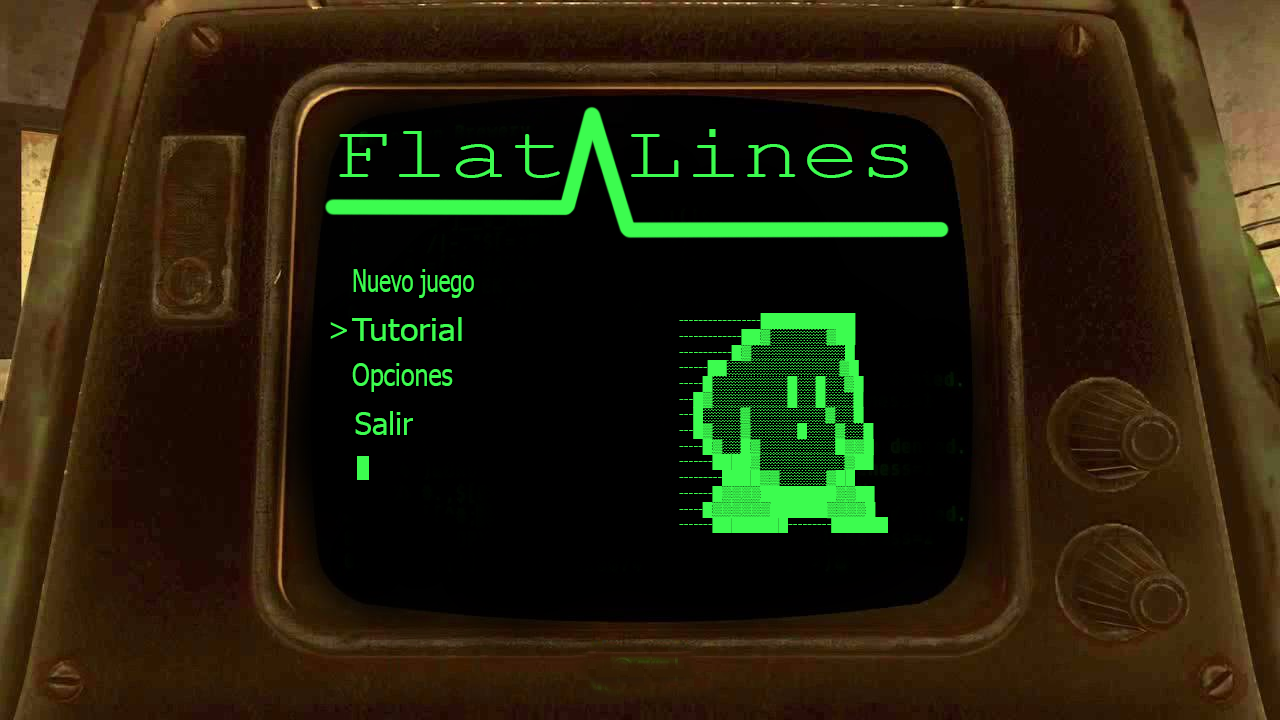
<style>
.page{position:relative;width:1280px;height:720px;background:#000000}
.page>*{position:absolute;margin:0}
.t1{font:74.3px "CourierNewPSMT";color:#3cfc4f;scale:1.32 1}
.t2{font:30.6px "Tahoma";color:#3cfc4f;scale:0.72 1}
.t3{font:30.6px "Tahoma";color:#3cfc4f;scale:1.12 1}
.t4{font:13.1px "Tahoma";color:#3cfc4f}
.t5{font:30.6px "Tahoma";color:#3cfc4f;scale:0.82 1}
.t6{font:30.6px "Tahoma";color:#3cfc4f}
</style>
<div class="page">
<p class="t1" style="left:339px;top:129px;width:569px;height:49px">Flat Lines</p>
<p class="t2" style="left:353px;top:269px;width:121px;height:29px">Nuevo juego</p>
<p class="t3" style="left:352px;top:317px;width:110px;height:24px">Tutorial</p>
<p class="t4" style="left:679px;top:313px;width:209px;height:220px">-----------------██████████<br>-------------██▓░░░░░░▓██<br>-----------█▓░░░░░░░░░░█<br>------██░░░░░░░░░░░░▓█<br>-----█░░░░░░░░█░░█░░▓█<br>---█▓░░░░░░░░█░░█░░░█<br>---█░░░░▓░░░░░░░░▓░░█<br>---█▓░░░▓░░░░░█░░░▓░░█<br>-----█▓░░█▓░░░░░░░░█▓▓█<br>-------████▓░░░░░░░░░▓██<br>---------████▓▓░░░░░▓██<br>-------█▓▓▓▓████████▓▓██<br>-----█▓▓▓▓▓▓██████▓▓▓▓█<br>-------████████---------██████</p>
<p class="t5" style="left:352px;top:363px;width:101px;height:29px">Opciones</p>
<p class="t6" style="left:355px;top:411px;width:58px;height:24px">Salir</p>
</div>
